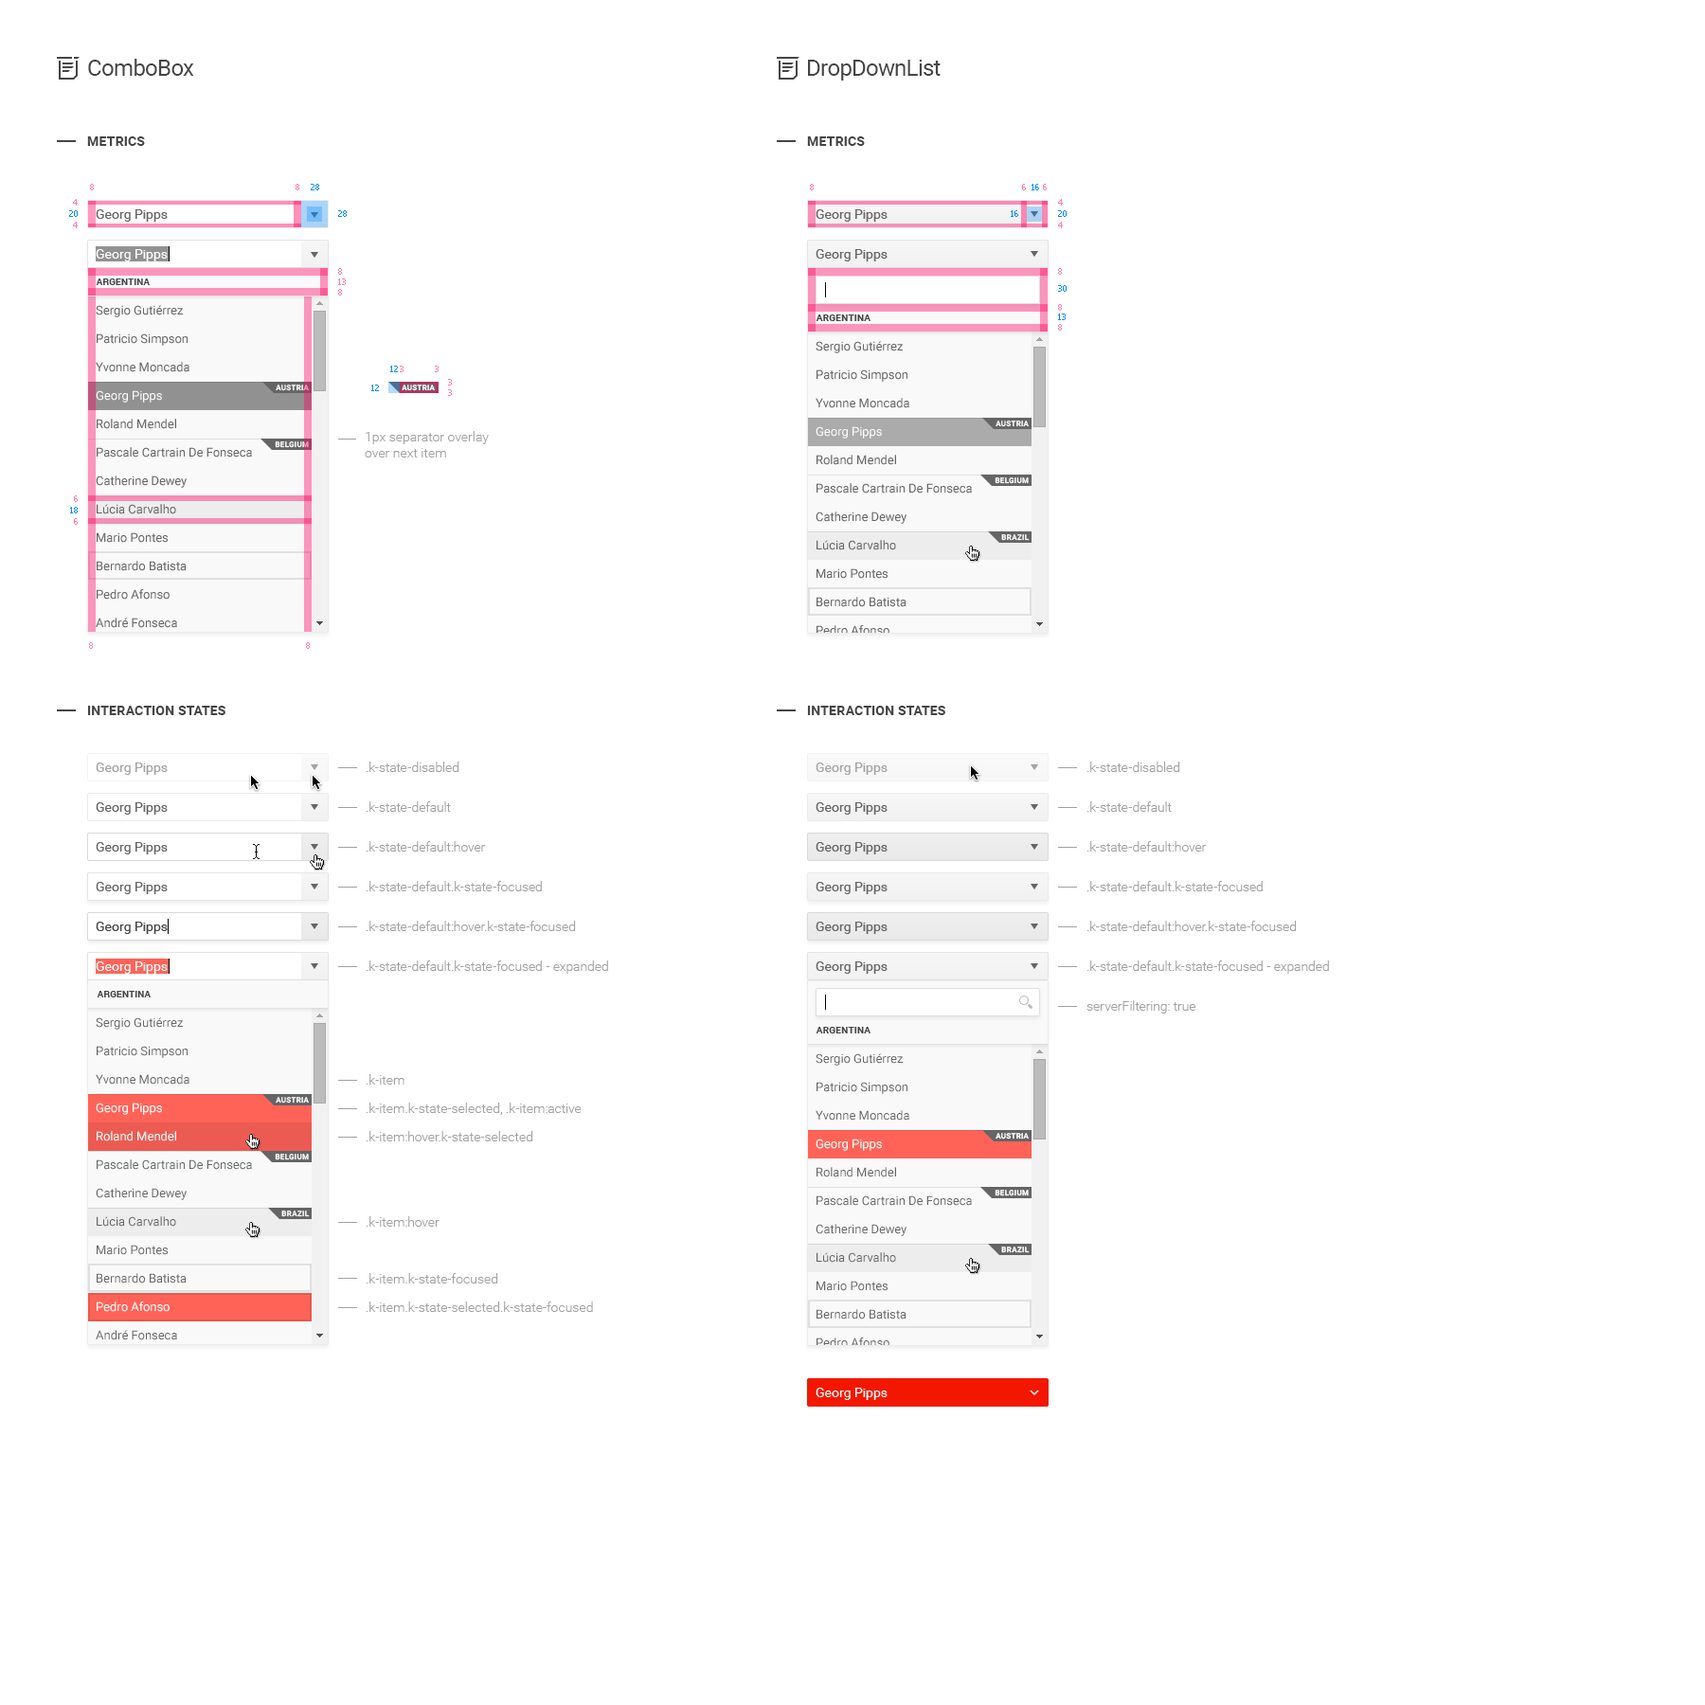
<style>
.page{position:relative;width:1705px;height:1705px;background:#ffffff}
.page>*{position:absolute;margin:0}
.t1{font:22.7px "Roboto-Regular";letter-spacing:-0.025em;color:#454545}
.t2{font:13.3px "Roboto-Bold";letter-spacing:0.01em;color:#454545;text-transform:uppercase}
.t3{font:8.5px "Tahoma";color:#ff7cae}
.t4{font:8.5px "Tahoma";color:#008aff}
.t5{font:13.3px "Roboto-Regular";color:#656565}
.t6{font:13.3px "Roboto-Regular";color:#ffffff}
.t7{font:9.5px "Roboto-Bold";letter-spacing:0.01em;color:#454545;text-transform:uppercase}
.t8{font:12.3px/28.4px "Roboto-Regular";color:#656565}
.t9{font:12.3px/28.4px "Roboto-Regular";color:#ffffff}
.t10{font:7.6px "Roboto-Bold";letter-spacing:0.01em;color:#ffffff;text-transform:uppercase}
.t11{font:13.3px "Roboto-Light";color:#a1a1a1}
.t12{font:13.3px/39.8px "Roboto-Light";color:#a1a1a1}
.t13{font:13.3px/28.4px "Roboto-Light";color:#a1a1a1}
.t14{font:13.3px "Roboto-Regular";color:#a3a3a3}
.t15{font:13.3px "Roboto-Regular";color:#454545}
</style>
<div class="page">
<p class="t1" style="left:88px;top:59px;width:106px;height:17px">ComboBox</p>
<p class="t1" style="left:808px;top:60px;width:133px;height:21px">DropDownList</p>
<p class="t2" style="left:87px;top:136px;width:58px;height:10px">Metrics</p>
<p class="t2" style="left:807px;top:136px;width:58px;height:10px">Metrics</p>
<p class="t3" style="left:90px;top:184px;width:4px;height:6px">8</p>
<p class="t3" style="left:296px;top:184px;width:3px;height:6px">8</p>
<p class="t4" style="left:311px;top:184px;width:8px;height:6px">28</p>
<p class="t3" style="left:810px;top:184px;width:4px;height:6px">8</p>
<p class="t3" style="left:1022px;top:184px;width:4px;height:6px">6</p>
<p class="t4" style="left:1032px;top:184px;width:7px;height:6px">16</p>
<p class="t3" style="left:1043px;top:184px;width:4px;height:6px">6</p>
<p class="t3" style="left:73px;top:199px;width:5px;height:7px">4</p>
<p class="t5" style="left:96px;top:209px;width:72px;height:13px">Georg Pipps</p>
<p class="t5" style="left:816px;top:209px;width:72px;height:13px">Georg Pipps</p>
<p class="t3" style="left:1058px;top:199px;width:5px;height:7px">4</p>
<p class="t4" style="left:69px;top:210px;width:9px;height:7px">20</p>
<p class="t3" style="left:73px;top:222px;width:5px;height:6px">4</p>
<p class="t4" style="left:338px;top:210px;width:9px;height:7px">28</p>
<p class="t4" style="left:1011px;top:210px;width:7px;height:7px">16</p>
<p class="t4" style="left:1058px;top:210px;width:9px;height:7px">20</p>
<p class="t3" style="left:1058px;top:222px;width:5px;height:6px">4</p>
<p class="t6" style="left:96px;top:249px;width:72px;height:12px">Georg Pipps</p>
<p class="t5" style="left:816px;top:249px;width:72px;height:12px">Georg Pipps</p>
<p class="t3" style="left:338px;top:268px;width:4px;height:7px">8</p>
<p class="t3" style="left:1058px;top:268px;width:4px;height:7px">8</p>
<p class="t7" style="left:96px;top:279px;width:54px;height:6px">Argentina</p>
<p class="t3" style="left:338px;top:279px;width:8px;height:6px">13</p>
<p class="t3" style="left:338px;top:289px;width:4px;height:7px">8</p>
<p class="t4" style="left:1058px;top:285px;width:9px;height:7px">30</p>
<p class="t8" style="left:96px;top:305px;width:156px;height:636px">Sergio Gutiérrez<br>Patricio Simpson<br>Yvonne Moncada<br><span class="t9">Georg Pipps<br></span>Roland Mendel<br>Pascale Cartrain De Fonseca<br>Catherine Dewey<br>Lúcia Carvalho<br>Mario Pontes<br>Bernardo Batista<br>Pedro Afonso<br>André Fonseca<br>Paula Parente<br>Anabela Domingues<br>Janete Limeira<br>Aria Cruz<br>Jean Fresnière<br>Elizabeth Lincoln<br>Yoshi Tannamuri<br>Palle Ibsen<br>Carlos Hernández<br>Felipe Izquierdo<br>Carlos González</p>
<p class="t3" style="left:1058px;top:304px;width:4px;height:7px">8</p>
<p class="t7" style="left:816px;top:315px;width:55px;height:6px">Argentina</p>
<p class="t4" style="left:1058px;top:314px;width:8px;height:6px">13</p>
<p class="t3" style="left:1058px;top:324px;width:4px;height:7px">8</p>
<p class="t8" style="left:816px;top:341px;width:156px;height:636px">Sergio Gutiérrez<br>Patricio Simpson<br>Yvonne Moncada<br><span class="t9">Georg Pipps<br></span>Roland Mendel<br>Pascale Cartrain De Fonseca<br>Catherine Dewey<br>Lúcia Carvalho<br>Mario Pontes<br>Bernardo Batista<br>Pedro Afonso<br>André Fonseca<br>Paula Parente<br>Anabela Domingues<br>Janete Limeira<br>Aria Cruz<br>Jean Fresnière<br>Elizabeth Lincoln<br>Yoshi Tannamuri<br>Palle Ibsen<br>Carlos Hernández<br>Felipe Izquierdo<br>Carlos González</p>
<p class="t4" style="left:390px;top:366px;width:8px;height:6px">12</p>
<p class="t3" style="left:400px;top:366px;width:4px;height:6px">3</p>
<p class="t3" style="left:435px;top:366px;width:4px;height:6px">3</p>
<p class="t4" style="left:371px;top:385px;width:8px;height:6px">12</p>
<p class="t10" style="left:402px;top:385px;width:33px;height:6px">Austria</p>
<p class="t3" style="left:448px;top:379px;width:4px;height:7px">3</p>
<p class="t3" style="left:448px;top:389px;width:4px;height:7px">3</p>
<p class="t11" style="left:365px;top:431px;width:124px;height:27px">1px separator overlay<br>over next item</p>
<p class="t3" style="left:74px;top:495px;width:4px;height:7px">6</p>
<p class="t4" style="left:70px;top:507px;width:8px;height:6px">18</p>
<p class="t3" style="left:74px;top:518px;width:4px;height:7px">6</p>
<p class="t3" style="left:89px;top:642px;width:4px;height:7px">8</p>
<p class="t3" style="left:306px;top:642px;width:4px;height:7px">8</p>
<p class="t2" style="left:87px;top:706px;width:138px;height:9px">Interaction states</p>
<p class="t2" style="left:807px;top:706px;width:138px;height:9px">Interaction states</p>
<p class="t12" style="left:366px;top:762px;width:242px;height:212px">.k-state-disabled<br>.k-state-default<br>.k-state-default:hover<br>.k-state-default.k-state-focused<br>.k-state-default<span class="t13">:hover</span>.k-state-focused<br>.k-state-default.k-state-focused - expanded</p>
<p class="t12" style="left:1087px;top:762px;width:242px;height:252px">.k-state-disabled<br>.k-state-default<br>.k-state-default:hover<br>.k-state-default.k-state-focused<br>.k-state-default<span class="t13">:hover</span>.k-state-focused<br>.k-state-default.k-state-focused - expanded<br>serverFiltering: true</p>
<p class="t14" style="left:96px;top:763px;width:72px;height:12px">Georg Pipps</p>
<p class="t14" style="left:816px;top:763px;width:72px;height:12px">Georg Pipps</p>
<p class="t5" style="left:96px;top:802px;width:72px;height:13px">Georg Pipps</p>
<p class="t5" style="left:816px;top:802px;width:72px;height:13px">Georg Pipps</p>
<p class="t5" style="left:96px;top:842px;width:72px;height:13px">Georg Pipps</p>
<p class="t5" style="left:816px;top:842px;width:72px;height:13px">Georg Pipps</p>
<p class="t5" style="left:96px;top:882px;width:72px;height:12px">Georg Pipps</p>
<p class="t5" style="left:816px;top:882px;width:72px;height:12px">Georg Pipps</p>
<p class="t15" style="left:96px;top:922px;width:72px;height:12px">Georg Pipps</p>
<p class="t5" style="left:816px;top:922px;width:72px;height:12px">Georg Pipps</p>
<p class="t6" style="left:96px;top:962px;width:72px;height:12px">Georg Pipps</p>
<p class="t5" style="left:816px;top:962px;width:72px;height:12px">Georg Pipps</p>
<p class="t7" style="left:97px;top:991px;width:54px;height:7px">Argentina</p>
<p class="t8" style="left:96px;top:1017px;width:156px;height:636px">Sergio Gutiérrez<br>Patricio Simpson<br>Yvonne Moncada<br><span class="t9">Georg Pipps<br>Roland Mendel<br></span>Pascale Cartrain De Fonseca<br>Catherine Dewey<br>Lúcia Carvalho<br>Mario Pontes<br>Bernardo Batista<br><span class="t9">Pedro Afonso<br></span>André Fonseca<br>Paula Parente<br>Anabela Domingues<br>Janete Limeira<br>Aria Cruz<br>Jean Fresnière<br>Elizabeth Lincoln<br>Yoshi Tannamuri<br>Palle Ibsen<br>Carlos Hernández<br>Felipe Izquierdo<br>Carlos González</p>
<p class="t7" style="left:816px;top:1027px;width:55px;height:7px">Argentina</p>
<p class="t8" style="left:816px;top:1053px;width:156px;height:636px">Sergio Gutiérrez<br>Patricio Simpson<br>Yvonne Moncada<br><span class="t9">Georg Pipps<br></span>Roland Mendel<br>Pascale Cartrain De Fonseca<br>Catherine Dewey<br>Lúcia Carvalho<br>Mario Pontes<br>Bernardo Batista<br>Pedro Afonso<br>André Fonseca<br>Paula Parente<br>Anabela Domingues<br>Janete Limeira<br>Aria Cruz<br>Jean Fresnière<br>Elizabeth Lincoln<br>Yoshi Tannamuri<br>Palle Ibsen<br>Carlos Hernández<br>Felipe Izquierdo<br>Carlos González</p>
<p class="t13" style="left:366px;top:1074px;width:227px;height:238px">.k-item<br>.k-item.k-state-selected, .k-item:active<br>.k-item:hover.k-state-selected<br><br><br>.k-item:hover<br><br>.k-item.k-state-focused<br>.k-item.k-state-selected.k-state-focused</p>
<p class="t6" style="left:816px;top:1388px;width:72px;height:12px">Georg Pipps</p>
</div>
